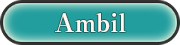
<style>
.page{position:relative;width:180px;height:45px}
.page>*{position:absolute;margin:0}
.t1{font:25px "RyuminPro-ExBold";color:#fff6f3}
</style>
<div class="page">
<p class="t1" style="left:55px;top:13px;width:71px;height:19px">Ambil</p>
</div>
